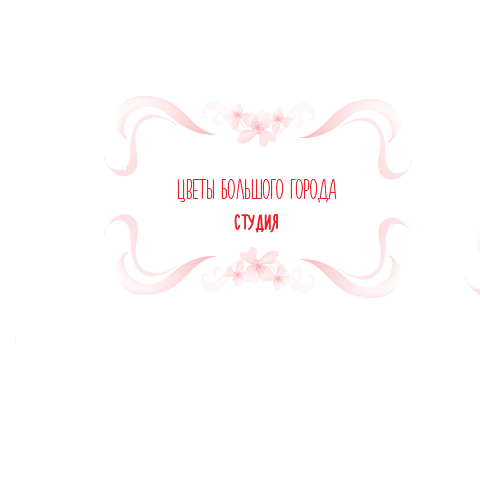
<style>
.page{position:relative;width:480px;height:480px;background:#ffffff}
.page>*{position:absolute;margin:0}
.t1{font:30px "NovitoNova-Thin";color:#eb2029}
.t2{font:24px "NovitoNova-Regular";color:#eb2029}
</style>
<div class="page">
<p class="t1" style="left:177px;top:179px;width:160px;height:24px">ЦВЕТЫ БОЛЬШОГО ГОРОДА</p>
<p class="t2" style="left:234px;top:214px;width:44px;height:19px">СТУДИЯ</p>
</div>
